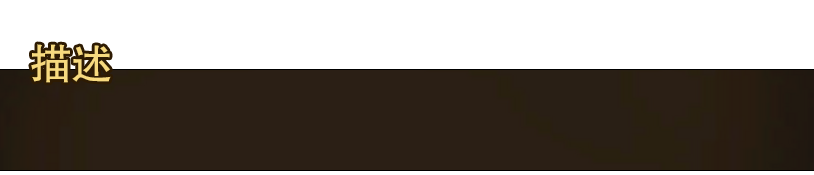
<style>
.page{position:relative;width:814px;height:175px;background:#ffffff}
.page>*{position:absolute;margin:0}
.t1{font:41.4px "FZHTJW--GB1-0";letter-spacing:-0.025em;color:#ffffff}
</style>
<div class="page">
<p class="t1" style="left:31px;top:44px;width:80px;height:39px">描述</p>
</div>
